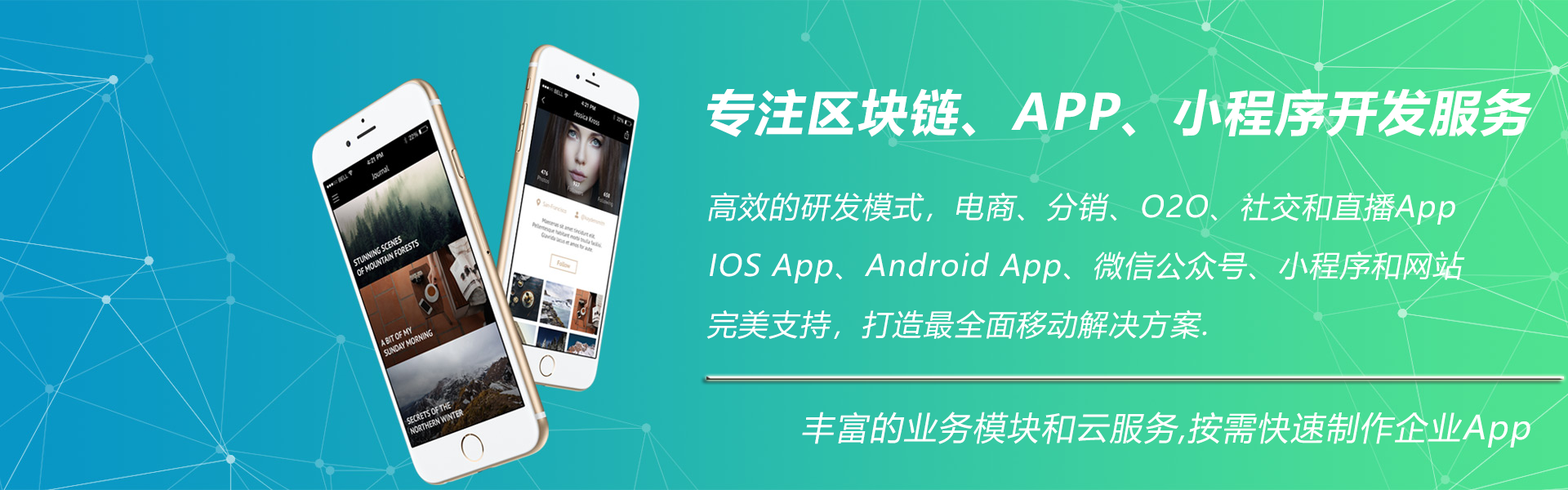
<style>
.page{position:relative;width:1568px;height:490px}
.page>*{position:absolute;margin:0}
.t1{font:49px "MicrosoftYaHei-Bold";letter-spacing:0.05em;color:#ffffff;font-style:italic}
.t2{font:29.4px/29.4px "MicrosoftYaHei";letter-spacing:0.05em;color:#ffffff;font-style:italic}
.t3{font:32.7px "MicrosoftYaHei";letter-spacing:0.05em;color:#ffffff;font-style:italic}
</style>
<div class="page">
<p class="t1" style="left:706px;top:88px;width:826px;height:49px">专注区块链、APP、小程序开发服务</p>
<p class="t2" style="left:706px;top:192px;width:759px;height:148px">高效的研发模式，电商、分销、O2O、社交和直播App<br><br>IOS App、Android App、微信公众号、小程序和网站<br><br>完美支持，打造最全面移动解决方案.</p>
<p class="t3" style="left:802px;top:412px;width:728px;height:36px">丰富的业务模块和云服务,按需快速制作企业App</p>
</div>
